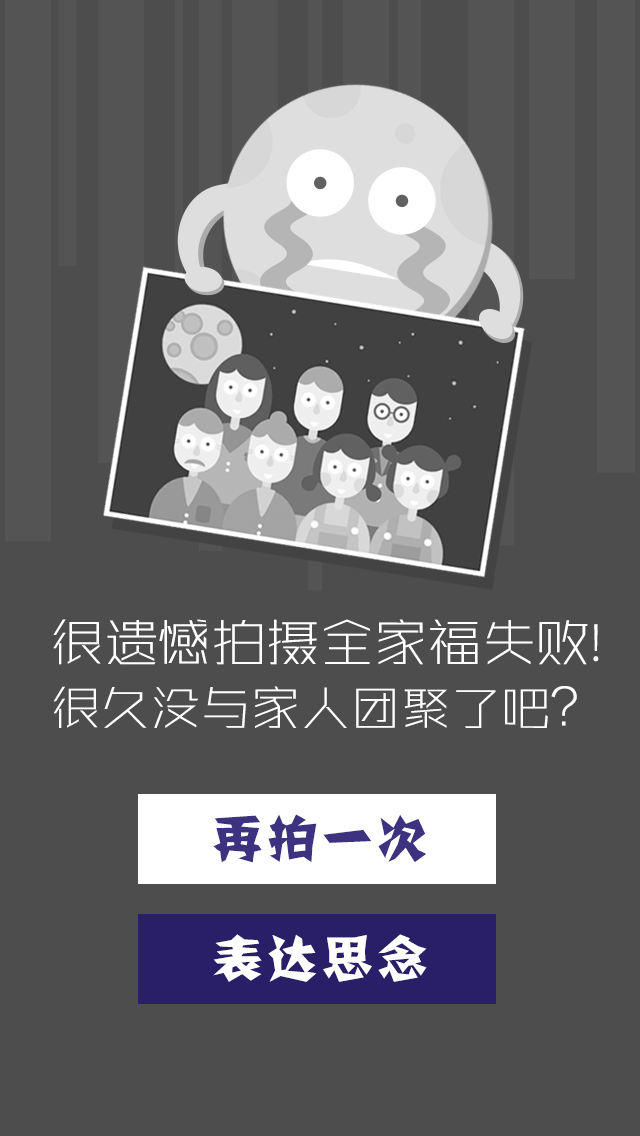
<style>
.page{position:relative;width:640px;height:1136px;background:#4d4d4d}
.page>*{position:absolute;margin:0}
.t1{font:54px/64px "RuiXian";color:#ffffff}
.t2{font:50px/64px "RuiXian";color:#ffffff}
.t3{font:50px "FZJZJW--GB1-0";letter-spacing:0.1em;color:#3c3280}
.t4{font:50px "FZJZJW--GB1-0";letter-spacing:0.1em;color:#fefefe}
</style>
<div class="page">
<p class="t1" style="left:53px;top:619px;width:546px;height:109px;text-align:center">很遗憾拍摄全家福失败!<br><span class="t2">很久没与家人团聚了吧？</span></p>
<p class="t3" style="left:213px;top:814px;width:214px;height:49px">再拍一次</p>
<p class="t4" style="left:213px;top:934px;width:214px;height:48px">表达思念</p>
</div>
